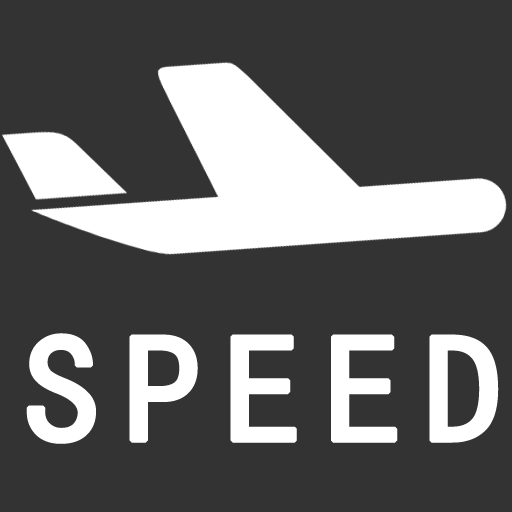
<style>
.page{position:relative;width:512px;height:512px;background:#333333}
.page>*{position:absolute;margin:0}
.t1{font:155.1px "SimHei";letter-spacing:0.12em;color:#ffffff;font-weight:bold}
</style>
<div class="page">
<p class="t1" style="left:26px;top:333px;width:473px;height:111px">SPEED</p>
</div>
